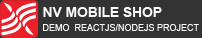
<style>
.page{position:relative;width:202px;height:38px;background:#333333}
.page>*{position:absolute;margin:0}
.t1{font:14px "Arial-BoldMT";letter-spacing:-0.01em;color:#f8f8f8}
.t2{font:9px "ArialMT";color:#f8f8f8}
</style>
<div class="page">
<p class="t1" style="left:43px;top:7px;width:119px;height:10px">NV MOBILE SHOP</p>
<p class="t2" style="left:43px;top:24px;width:156px;height:7px">DEMO  REACTJS/NODEJS PROJECT</p>
</div>
